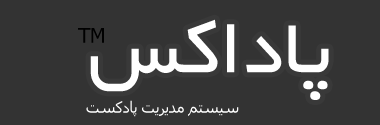
<style>
.page{position:relative;width:380px;height:125px;background:#333333}
.page>*{position:absolute;margin:0}
.t1{font:20.2px "Tahoma";color:#000000}
.t2{font:85.3px "BYekan";color:#ffffff}
.t3{font:15.7px "Tahoma";letter-spacing:-0.04em;color:#fdfdfd}
</style>
<div class="page">
<p class="t1" style="left:78px;top:28px;width:26px;height:15px">TM</p>
<p class="t2" style="left:90px;top:19px;width:239px;height:81px">پاداکس</p>
<p class="t3" style="left:86px;top:100px;width:153px;height:17px">سیستم مدیریت پادکست</p>
</div>
